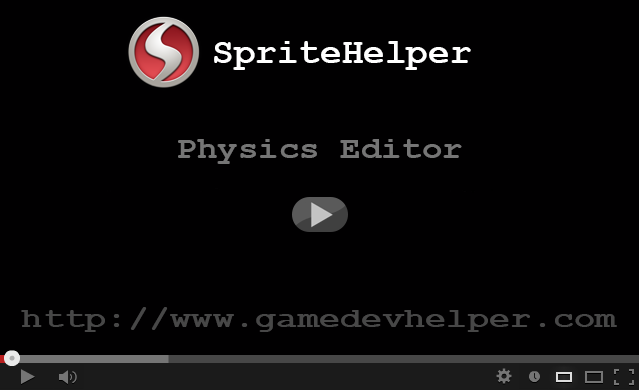
<style>
.page{position:relative;width:639px;height:390px;background:#010001}
.page>*{position:absolute;margin:0}
.t1{font:36px "CourierNewPS-BoldMT";color:#ffffff}
.t2{font:30px "CourierNewPS-BoldMT";color:#757575;scale:1.14 1}
.t3{font:28px "CourierNewPS-BoldMT";color:#474747;scale:1.27 1}
</style>
<div class="page">
<p class="t1" style="left:214px;top:41px;width:257px;height:29px">SpriteHelper</p>
<p class="t2" style="left:178px;top:139px;width:284px;height:25px">Physics Editor</p>
<p class="t3" style="left:21px;top:307px;width:596px;height:25px">http://www.gamedevhelper.com</p>
</div>
